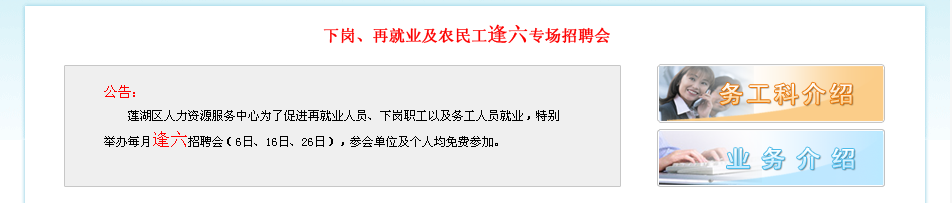
<style>
.page{position:relative;width:952px;height:203px;background:#ffffff}
.page>*{position:absolute;margin:0}
.t1{font:16px "NSimSun";color:#fd0101;font-weight:bold}
.t2{font:20px "NSimSun";color:#fd0101;font-weight:bold}
.t3{font:12px "NSimSun";color:#000000}
.t4{font:14px "NSimSun";color:#fd0101}
.t5{font:18px "NSimSun";color:#fe0000}
</style>
<div class="page">
<p class="t1" style="left:323px;top:24px;width:287px;height:20px">下岗、再就业及农民工<span class="t2">逢六</span>专场招聘会</p>
<p class="t3" style="left:104px;top:85px;width:455px;height:62px;text-align:justify"><span class="t4">公告：<br></span>    莲湖区人力资源服务中心为了促进再就业人员、下岗职工以及务工人员就业，特别<br>举办每月<span class="t5">逢六</span>招聘会（6日、16日、26日），参会单位及个人均免费参加。</p>
</div>
